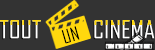
<style>
.page{position:relative;width:155px;height:50px;background:#333333}
.page>*{position:absolute;margin:0}
.t1{font:24px "AgencyFB-Reg";color:#ffffff;scale:1.1 1}
.t2{font:18px "AgencyFB-Reg";color:#000000;scale:1.1 1}
</style>
<div class="page">
<p class="t1" style="left:0px;top:20px;width:155px;height:19px">TOUT          CINEMA</p>
<p class="t2" style="left:61px;top:26px;width:19px;height:18px;rotate:-16deg">UN</p>
</div>
